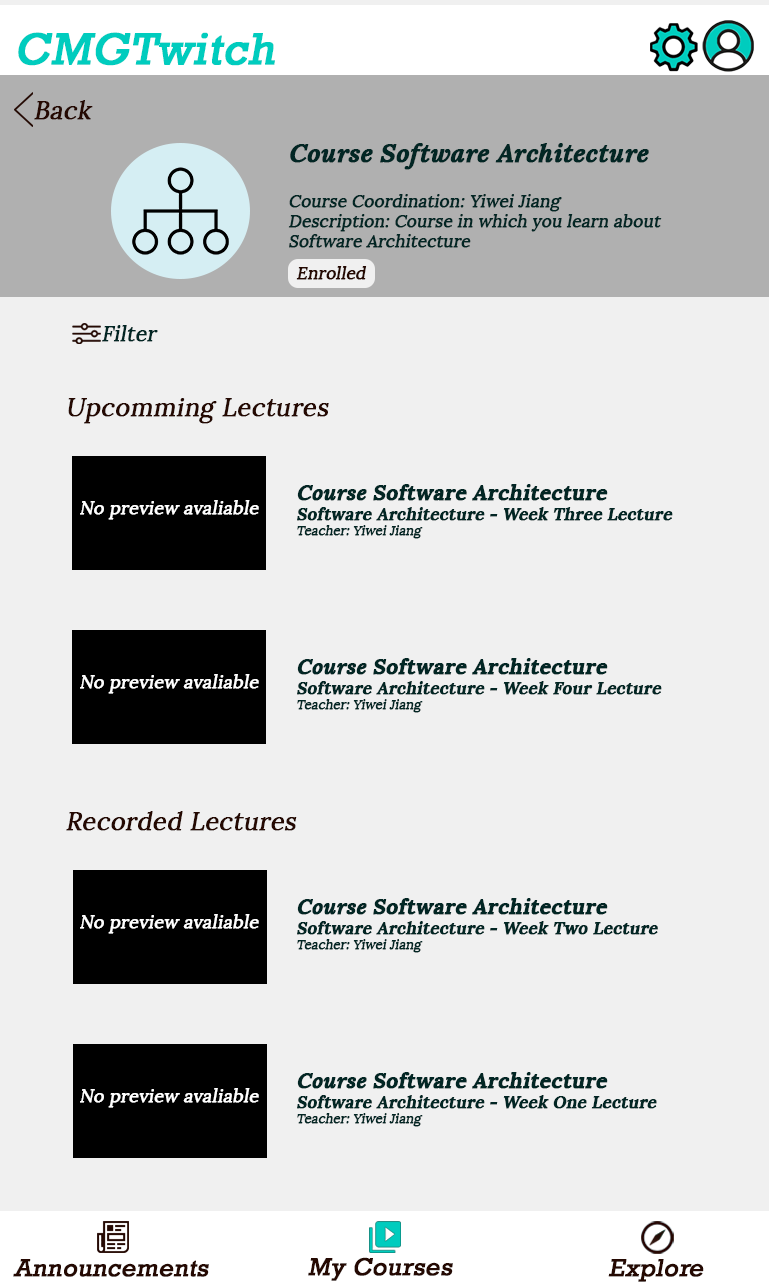
<style>
.page{position:relative;width:769px;height:1288px;background:#f0f0f0}
.page>*{position:absolute;margin:0}
.t1{font:45.4px "Rockwell";color:#00ccbe;font-weight:bold;font-style:italic}
.t2{font:25px "Lora-Regular";color:#250902;font-weight:bold;font-style:italic}
.t3{font:16.7px "Lora-Regular";color:#022624;font-weight:bold;font-style:italic}
.t4{font:25px "Lora-BoldItalic";color:#022624;font-weight:bold;font-style:italic}
.t5{font:16.7px "Lora-Regular";color:#250902;font-weight:bold;font-style:italic}
.t6{font:20.8px "Lora-Regular";color:#022624;font-weight:bold;font-style:italic}
.t7{font:16.7px "Lora-Bold";color:#022624;font-weight:bold;font-style:italic}
.t8{font:20.8px "Lora-BoldItalic";color:#022624;font-weight:bold;font-style:italic}
.t9{font:20.8px "Lora-Bold";color:#022624;font-weight:bold;font-style:italic}
.t10{font:12.5px "Lora-Regular";color:#022624;font-weight:bold;font-style:italic}
.t11{font:17.7px "Lora-Regular";color:#ffffff;font-weight:bold;font-style:italic}
.t12{font:25px "Rockwell";color:#250902;font-weight:bold;font-style:italic}
</style>
<div class="page">
<p class="t1" style="left:18px;top:32px;width:257px;height:34px">CMGTwitch</p>
<p class="t2" style="left:34px;top:100px;width:59px;height:20px">Back</p>
<p class="t3" style="left:288px;top:143px;width:374px;height:105px"><span class="t4">Course Software Architecture<br><br></span>Course Coordination: Yiwei Jiang<br>Description: Course in which you learn about Software Architecture</p>
<p class="t5" style="left:296px;top:266px;width:71px;height:14px">Enrolled</p>
<p class="t6" style="left:102px;top:325px;width:56px;height:17px">Filter</p>
<p class="t2" style="left:68px;top:398px;width:261px;height:26px">Upcomming Lectures</p>
<p class="t7" style="left:297px;top:484px;width:376px;height:55px"><span class="t8">Course </span><span class="t9">Software Architecture<br></span>Software Architecture - Week Three Lecture<br><span class="t10">Teacher: Yiwei Jiang</span></p>
<p class="t11" style="left:80px;top:500px;width:179px;height:20px">No preview avaliable</p>
<p class="t7" style="left:297px;top:658px;width:365px;height:55px"><span class="t8">Course </span><span class="t9">Software Architecture<br></span>Software Architecture - Week Four Lecture<br><span class="t10">Teacher: Yiwei Jiang</span></p>
<p class="t11" style="left:80px;top:674px;width:179px;height:20px">No preview avaliable</p>
<p class="t2" style="left:66px;top:811px;width:231px;height:20px">Recorded Lectures</p>
<p class="t7" style="left:297px;top:898px;width:361px;height:55px"><span class="t8">Course </span><span class="t9">Software Architecture<br></span>Software Architecture - Week Two Lecture<br><span class="t10">Teacher: Yiwei Jiang</span></p>
<p class="t11" style="left:80px;top:914px;width:179px;height:20px">No preview avaliable</p>
<p class="t7" style="left:297px;top:1072px;width:360px;height:55px"><span class="t8">Course </span><span class="t9">Software Architecture<br></span>Software Architecture - Week One Lecture<br><span class="t10">Teacher: Yiwei Jiang</span></p>
<p class="t11" style="left:80px;top:1088px;width:179px;height:20px">No preview avaliable</p>
<p class="t12" style="left:13px;top:1259px;width:196px;height:18px">Announcements</p>
<p class="t12" style="left:308px;top:1257px;width:145px;height:24px">My Courses</p>
<p class="t12" style="left:608px;top:1259px;width:96px;height:23px">Explore</p>
</div>
